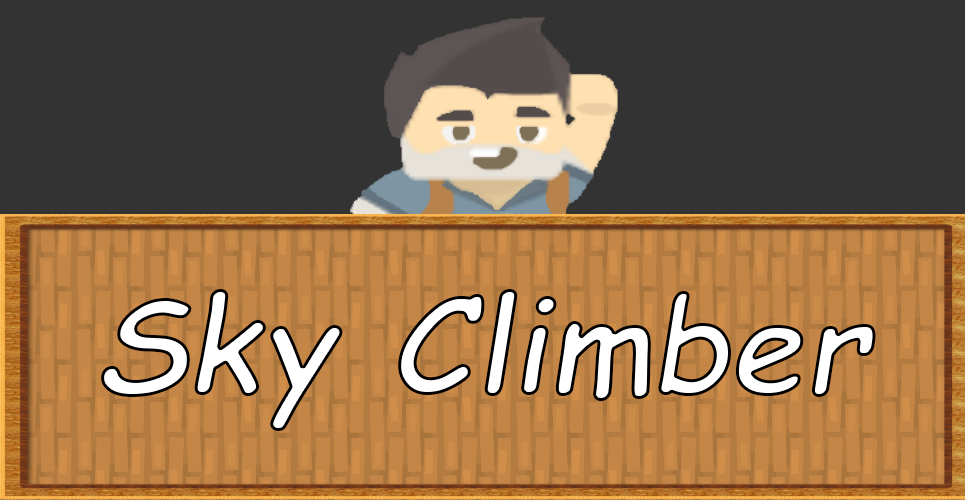
<style>
.page{position:relative;width:965px;height:500px;background:#333333}
.page>*{position:absolute;margin:0}
.t1{font:133.3px "ComicSansMS-BoldItalic";color:#ffffff}
</style>
<div class="page">
<p class="t1" style="left:101px;top:289px;width:775px;height:142px">Sky Climber</p>
</div>
